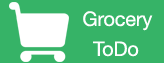
<style>
.page{position:relative;width:164px;height:63px;background:#36b367}
.page>*{position:absolute;margin:0}
.t1{font:20px/30px "HelveticaNeue";letter-spacing:-0.01em;color:#fefefe}
</style>
<div class="page">
<p class="t1" style="left:83px;top:11px;width:70px;height:46px">Grocery<br>  ToDo</p>
</div>
